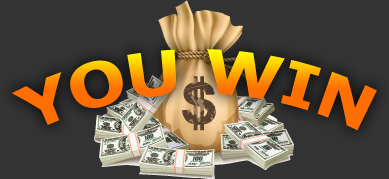
<style>
.page{position:relative;width:389px;height:179px;background:#333333}
.page>*{position:absolute;margin:0}
.t1{font:60px "Verdana-Bold"}
</style>
<div class="page">
<p class="t1" style="left:12px;top:49px;width:365px;height:82px">YOU WIN</p>
</div>
